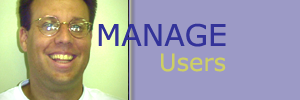
<style>
.page{position:relative;width:300px;height:100px;background:#9c9ac6}
.page>*{position:absolute;margin:0}
.t1{font:30px "Verdana";color:#333399}
.t2{font:24px "Verdana";color:#cecf63}
</style>
<div class="page">
<p class="t1" style="left:98px;top:23px;width:128px;height:24px">MANAGE</p>
<p class="t2" style="left:161px;top:53px;width:65px;height:19px">Users</p>
</div>
